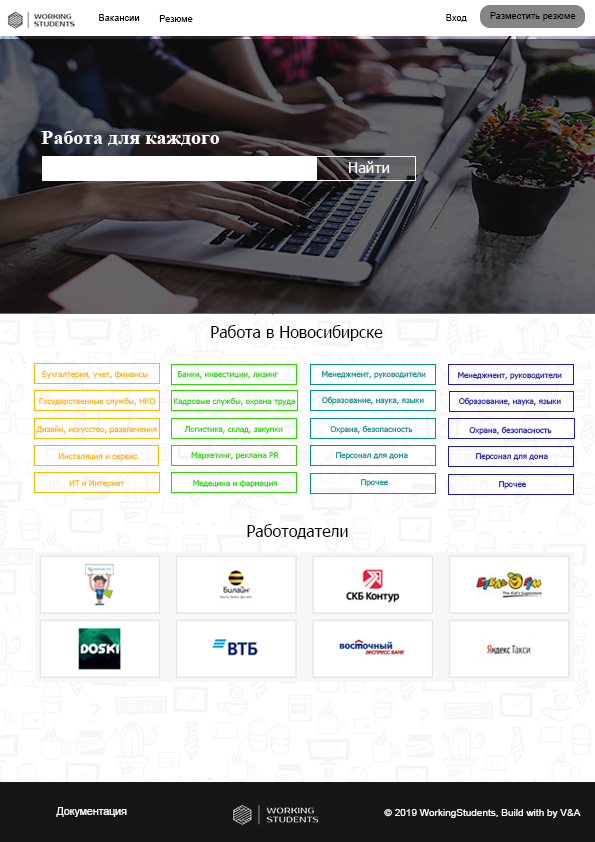
<style>
.page{position:relative;width:595px;height:842px;background:#ffffff}
.page>*{position:absolute;margin:0}
.t1{font:9.5px "ArialMT";color:#000000}
.t2{font:20px "TimesNewRomanPS-BoldMT";color:#fefefe}
.t3{font:15px "Tahoma";color:#ffffff}
.t4{font:16px "Tahoma";color:#010101}
.t5{font:8.1px "Tahoma"}
.t6{font:8.1px "Tahoma";color:#2dd700}
.t7{font:8.1px "Tahoma";color:#01939a}
.t8{font:8.1px "Tahoma";color:#1b1bb3}
.t9{font:8.1px "Tahoma";color:#ffb600}
.t10{font:16px "Tahoma";color:#000000}
.t11{font:10.5px "ArialMT";color:#fdfdfd}
.t12{font:9.5px "ArialMT";color:#fdfdfd;scale:1.06 1}
</style>
<div class="page">
<p class="t1" style="left:99px;top:14px;width:41px;height:7px">Вакансии</p>
<p class="t1" style="left:159px;top:15px;width:34px;height:7px">Резюме</p>
<p class="t1" style="left:446px;top:14px;width:21px;height:8px">Вход</p>
<p class="t1" style="left:490px;top:12px;width:86px;height:9px">Разместить резюме</p>
<p class="t2" style="left:41px;top:130px;width:178px;height:16px">Работа для каждого</p>
<p class="t3" style="left:349px;top:161px;width:41px;height:12px">Найти</p>
<p class="t4" style="left:211px;top:325px;width:172px;height:16px">Работа в Новосибирске</p>
<p class="t5" style="left:42px;top:370px;width:106px;height:9px">Бухгалтерия, учет, финансы</p>
<p class="t6" style="left:177px;top:371px;width:102px;height:8px">Банки, инвестиции, лизинг</p>
<p class="t7" style="left:322px;top:371px;width:104px;height:8px">Менеджмент, руководители</p>
<p class="t8" style="left:458px;top:372px;width:104px;height:8px">Менеджмент, руководители</p>
<p class="t5" style="left:39px;top:397px;width:117px;height:9px">Государственные службы, НКО</p>
<p class="t5" style="left:173px;top:397px;width:122px;height:9px">Кадровые службы, охрана труда</p>
<p class="t7" style="left:322px;top:396px;width:102px;height:9px">Образование, наука, языки</p>
<p class="t8" style="left:459px;top:397px;width:102px;height:9px">Образование, наука, языки</p>
<p class="t9" style="left:36px;top:425px;width:121px;height:9px">Дизайн, искусство, развлечения</p>
<p class="t5" style="left:330px;top:425px;width:83px;height:9px">Охрана, безопасность</p>
<p class="t6" style="left:184px;top:426px;width:99px;height:8px">Логистика, склад, закупки</p>
<p class="t5" style="left:469px;top:426px;width:83px;height:9px">Охрана, безопасность</p>
<p class="t9" style="left:59px;top:453px;width:79px;height:8px">Инсталяция и сервис</p>
<p class="t5" style="left:191px;top:452px;width:88px;height:8px">Маркетинг, реклама PR</p>
<p class="t7" style="left:336px;top:452px;width:72px;height:8px">Персонал для дома</p>
<p class="t8" style="left:476px;top:453px;width:72px;height:8px">Персонал для дома</p>
<p class="t9" style="left:69px;top:480px;width:56px;height:8px">ИТ и Интернет</p>
<p class="t6" style="left:193px;top:479px;width:85px;height:9px">Медецина и фармация</p>
<p class="t7" style="left:361px;top:479px;width:27px;height:8px">Прочее</p>
<p class="t8" style="left:499px;top:481px;width:27px;height:8px">Прочее</p>
<p class="t10" style="left:247px;top:524px;width:101px;height:15px">Работодатели</p>
<p class="t11" style="left:56px;top:807px;width:71px;height:10px">Документация</p>
<p class="t12" style="left:384px;top:809px;width:197px;height:9px">© 2019 WorkingStudents, Build with by V&amp;A</p>
</div>
